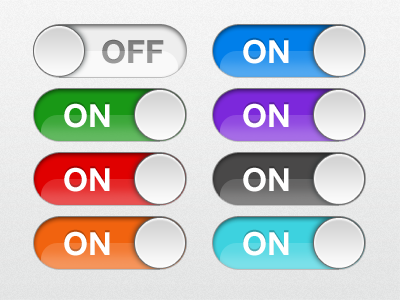
<style>
.page{position:relative;width:400px;height:300px}
.page>*{position:absolute;margin:0}
.t1{font:32px "HelveticaNeueLTPro-Bd"}
.t2{font:32px "HelveticaNeueLTPro-Bd";color:#ffffff}
</style>
<div class="page">
<p class="t1" style="left:102px;top:39px;width:62px;height:25px">OFF</p>
<p class="t2" style="left:243px;top:39px;width:46px;height:25px">ON</p>
<p class="t2" style="left:64px;top:103px;width:46px;height:25px">ON</p>
<p class="t2" style="left:243px;top:103px;width:46px;height:25px">ON</p>
<p class="t2" style="left:64px;top:167px;width:46px;height:25px">ON</p>
<p class="t2" style="left:243px;top:167px;width:46px;height:25px">ON</p>
<p class="t2" style="left:64px;top:231px;width:46px;height:25px">ON</p>
<p class="t2" style="left:243px;top:231px;width:46px;height:25px">ON</p>
</div>
